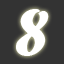
<style>
.page{position:relative;width:64px;height:64px;background:#333333}
.page>*{position:absolute;margin:0}
.t1{font:72px "ForteMT";color:#ffffff}
</style>
<div class="page">
<p class="t1" style="left:16px;top:9px;width:33px;height:47px">8</p>
</div>
